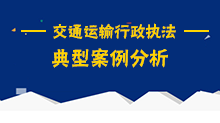
<style>
.page{position:relative;width:220px;height:123px;background:#032d79}
.page>*{position:absolute;margin:0}
.t1{font:15.5px "FZYHJW--GB1-0";color:#ffd400}
.t2{font:19.6px "FZYHJW--GB1-0";color:#ffd400}
</style>
<div class="page">
<p class="t1" style="left:53px;top:23px;width:123px;height:16px">交通运输行政执法</p>
<p class="t2" style="left:52px;top:48px;width:116px;height:20px">典型案例分析</p>
</div>
